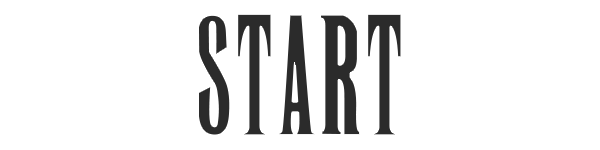
<style>
.page{position:relative;width:600px;height:150px;background:#ffffff}
.page>*{position:absolute;margin:0}
.t1{font:125px "New";color:#2b2b2b}
</style>
<div class="page">
<p class="t1" style="left:198px;top:13px;width:204px;height:123px">START</p>
</div>
